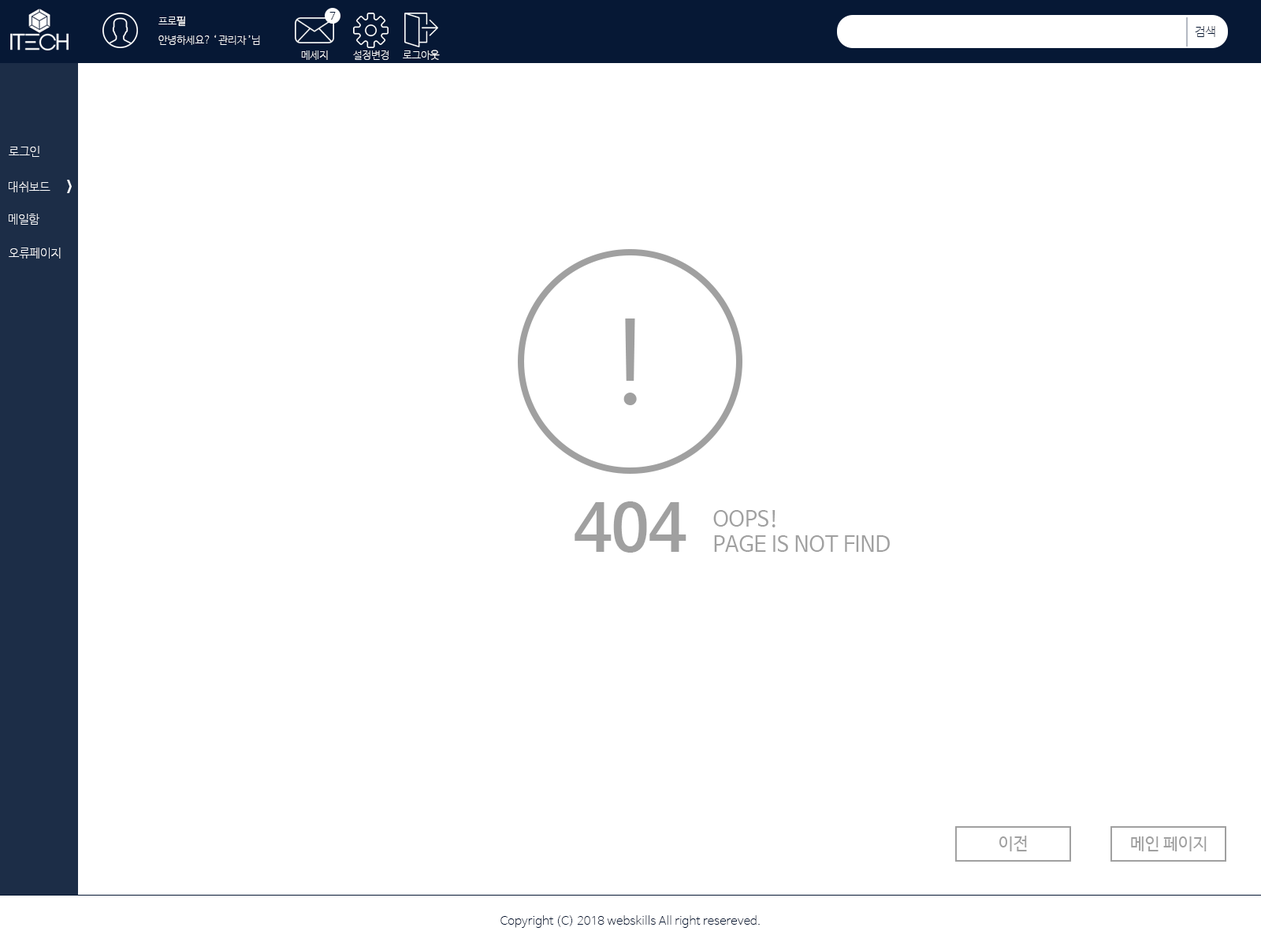
<style>
.page{position:relative;width:1261px;height:946px;background:#ffffff}
.page>*{position:absolute;margin:0}
.t1{font:10.2px "NanumBarunGothicUltraLight";color:#ffffff;text-transform:uppercase}
.t2{font:11px "NanumBarunGothicLight";color:#061834;text-transform:uppercase}
.t3{font:11.8px "NanumBarunGothicUltraLight";color:#061834;text-transform:uppercase}
.t4{font:11.8px "NanumBarunGothicUltraLight";color:#fefeff;text-transform:uppercase}
.t5{font:118.2px "MalgunGothic";color:#a0a0a0;text-transform:uppercase}
.t6{font:63.8px "NanumBarunGothicBold";color:#a0a0a0;text-transform:uppercase}
.t7{font:21.3px "NanumBarunGothic";color:#a0a0a0;text-transform:uppercase}
.t8{font:16.5px "NanumBarunGothic";color:#a0a0a0;text-transform:uppercase}
.t9{font:11.8px "NanumBarunGothicUltraLight";color:#061834}
</style>
<div class="page">
<p class="t1" style="left:158px;top:16px;width:27px;height:10px">프로필</p>
<p class="t2" style="left:329px;top:12px;width:7px;height:8px">7</p>
<p class="t3" style="left:1195px;top:26px;width:20px;height:11px">검색</p>
<p class="t1" style="left:158px;top:35px;width:102px;height:10px">안녕하세요? ‘ 관리자 ’님</p>
<p class="t1" style="left:301px;top:50px;width:27px;height:10px">메세지</p>
<p class="t1" style="left:353px;top:50px;width:36px;height:10px">설정변경</p>
<p class="t1" style="left:403px;top:50px;width:37px;height:10px">로그아웃</p>
<p class="t4" style="left:9px;top:146px;width:30px;height:11px">로그인</p>
<p class="t4" style="left:9px;top:181px;width:41px;height:11px">대쉬보드</p>
<p class="t4" style="left:9px;top:214px;width:30px;height:11px">메일함</p>
<p class="t4" style="left:9px;top:247px;width:52px;height:11px">오류페이지</p>
<p class="t5" style="left:623px;top:318px;width:14px;height:87px">!</p>
<p class="t6" style="left:575px;top:501px;width:111px;height:51px">404</p>
<p class="t7" style="left:713px;top:510px;width:177px;height:42px">OOPS!<br>PAGE IS NOT FIND</p>
<p class="t8" style="left:999px;top:835px;width:28px;height:16px">이전</p>
<p class="t8" style="left:1131px;top:836px;width:76px;height:15px">메인 페이지</p>
<p class="t9" style="left:500px;top:915px;width:260px;height:13px">Copyright (C) 2018 webskills All right resereved.</p>
</div>
